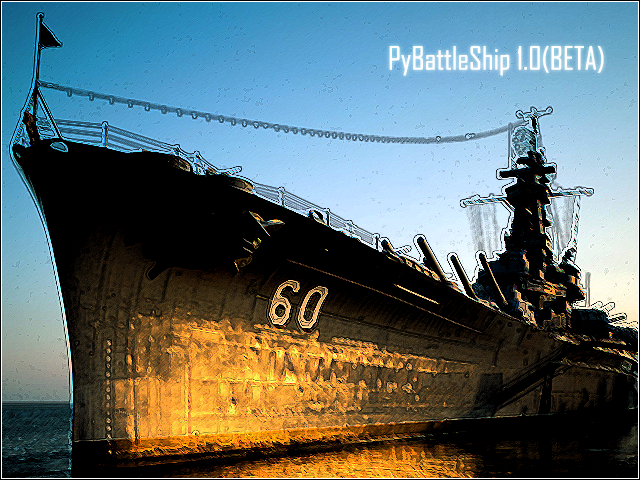
<style>
.page{position:relative;width:640px;height:480px;background:#000000}
.page>*{position:absolute;margin:0}
.t1{font:30.9px "AgencyFB-Reg";color:#ffffff}
</style>
<div class="page">
<p class="t1" style="left:389px;top:46px;width:215px;height:30px">PyBattleShip 1.0(BETA)</p>
</div>
